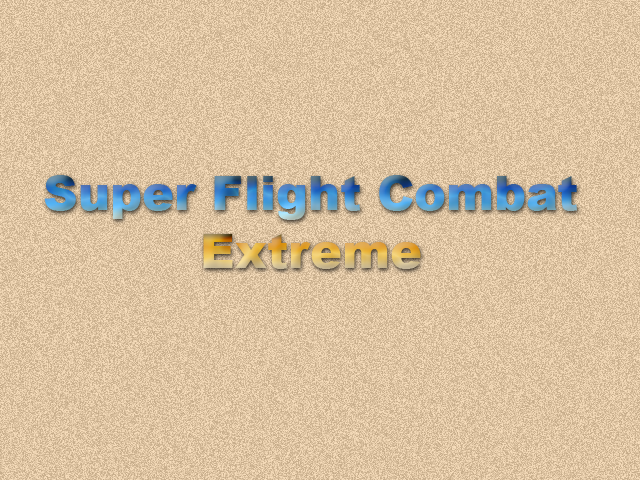
<style>
.page{position:relative;width:640px;height:480px}
.page>*{position:absolute;margin:0}
.t1{font:48px "Arial-Black"}
</style>
<div class="page">
<p class="t1" style="left:44px;top:175px;width:533px;height:94px;text-align:center">Super Flight Combat Extreme</p>
</div>
